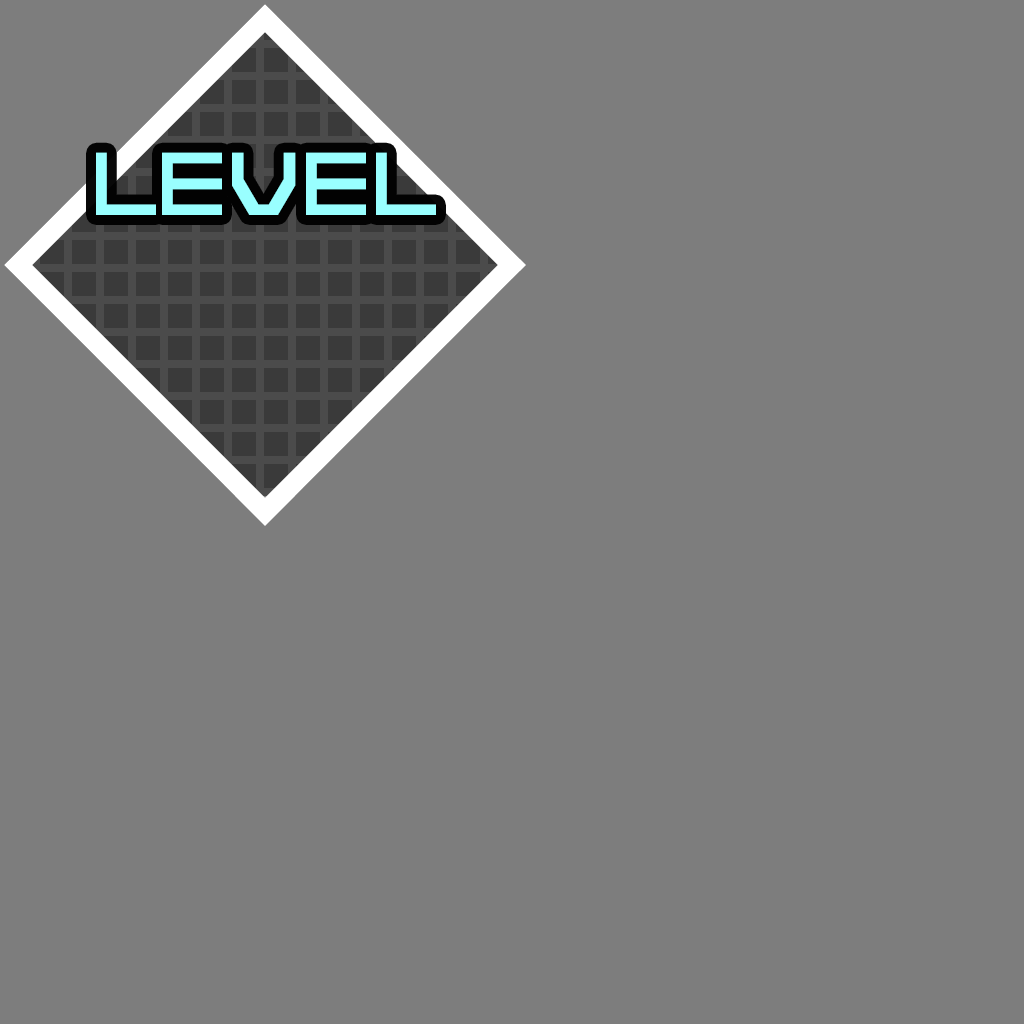
<style>
.page{position:relative;width:1024px;height:1024px;background:#7d7d7d}
.page>*{position:absolute;margin:0}
.t1{font:70px "7THDR2020Regular";letter-spacing:0.02em;color:#99ffff;text-transform:uppercase;font-weight:bold;scale:0.95 1}
.t2{font:70px "7THDR2020Regular";letter-spacing:-0.04em;color:#99ffff;text-transform:uppercase;font-weight:bold;scale:0.95 1}
.t3{font:70px "7THDR2020Regular";letter-spacing:0.02em;color:#99ffff;text-transform:uppercase;font-weight:bold}
</style>
<div class="page">
<p class="t1" style="left:96px;top:152px;width:340px;height:63px"><span class="t2">L</span>E<span class="t3">V</span>EL</p>
</div>
